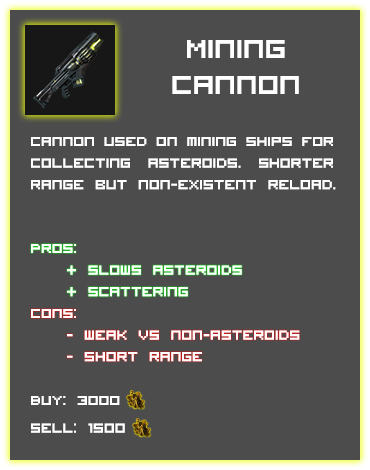
<style>
.page{position:relative;width:370px;height:470px;background:#4c4c4c}
.page>*{position:absolute;margin:0}
.t1{font:36px/12px "VisitorTT1BRK";color:#ffffff}
.t2{font:18px "VisitorTT1BRK";color:#ffffff}
</style>
<div class="page">
<p class="t1" style="left:172px;top:40px;width:127px;height:54px;text-align:center">Mining <br><br><br>cannon</p>
<p class="t2" style="left:31px;top:137px;width:305px;height:53px;text-align:justify">Cannon used on mining ships for collecting asteroids. Shorter range but non-existent reload.</p>
<p class="t2" style="left:31px;top:244px;width:211px;height:53px;text-align:justify">Pros:<br> + Slows asteroids<br> + scattering</p>
<p class="t2" style="left:31px;top:309px;width:269px;height:53px;text-align:justify">Cons:<br> - weak vs non-asteroids<br> - short range</p>
<p class="t2" style="left:31px;top:396px;width:94px;height:37px">Buy: 3000 <br><br>Sell: 1500</p>
</div>
